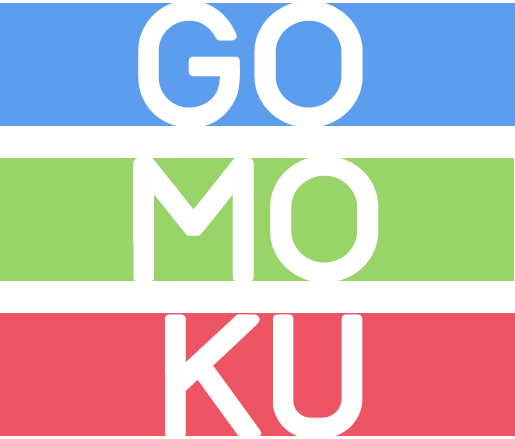
<style>
.page{position:relative;width:515px;height:439px;background:#ffffff}
.page>*{position:absolute;margin:0}
.t1{font:154.2px "Track";color:#ffffff}
</style>
<div class="page">
<p class="t1" style="left:138px;top:0px;width:225px;height:128px">GO</p>
<p class="t1" style="left:133px;top:155px;width:246px;height:128px">MO</p>
<p class="t1" style="left:165px;top:314px;width:198px;height:124px">KU</p>
</div>
